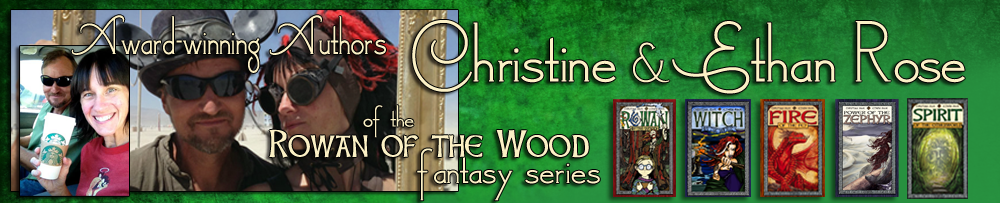
<style>
.page{position:relative;width:1000px;height:203px}
.page>*{position:absolute;margin:0}
.t1{font:60.9px "LondonderryAirNF";color:#fbf0c5;scale:0.82 1}
.t2{font:95.3px "LondonderryAirNF";color:#fbf0c5}
.t3{font:61.2px "LondonderryAirNF";color:#fbf0c5}
.t4{font:34.3px "LondonderryAirNF";color:#fbf0c5;scale:1.04 1}
.t5{font:33.5px/26.1px "CelticHand";color:#fbf0c5}
.t6{font:55.8px/26.1px "LondonderryAirNF";color:#fbf0c5}
</style>
<div class="page">
<p class="t1" style="left:71px;top:15px;width:315px;height:58px">Award-winning Authors</p>
<p class="t2" style="left:412px;top:20px;width:553px;height:74px">Christine <span class="t3">&amp;</span>Ethan Rose</p>
<p class="t4" style="left:363px;top:105px;width:51px;height:33px">of the</p>
<p class="t5" style="left:269px;top:129px;width:331px;height:72px;text-align:right">Rowan of the Wood<span class="t6"> <br>fantasy series</span></p>
</div>
